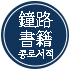
<style>
.page{position:relative;width:70px;height:70px;background:#11345a}
.page>*{position:absolute;margin:0}
.t1{font:19px/19px "HCRBatang-Bold";letter-spacing:-0.04em;color:#ffffff;scale:0.95 1}
.t2{font:9.5px "HCRBatang-Bold";letter-spacing:-0.04em;color:#ffffff}
</style>
<div class="page">
<p class="t1" style="left:19px;top:11px;width:34px;height:36px;text-align:center">鐘路<br>書籍</p>
<p class="t2" style="left:18px;top:49px;width:35px;height:10px">종로서적</p>
</div>
